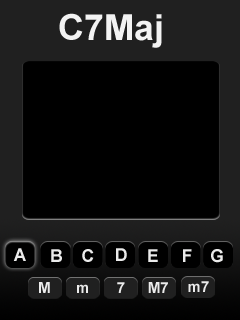
<style>
.page{position:relative;width:240px;height:320px;background:#000000}
.page>*{position:absolute;margin:0}
.t1{font:36px "Arial-BoldMT";color:#f3f3f3}
.t2{font:17.7px "Arial-BoldMT";color:#ebebeb}
.t3{font:15.1px "Arial-BoldMT";color:#ebebeb}
</style>
<div class="page">
<p class="t1" style="left:59px;top:13px;width:103px;height:35px">C7Maj</p>
<p class="t2" style="left:13px;top:248px;width:13px;height:13px">A</p>
<p class="t2" style="left:51px;top:249px;width:11px;height:13px">B</p>
<p class="t2" style="left:82px;top:249px;width:12px;height:13px">C</p>
<p class="t2" style="left:116px;top:248px;width:11px;height:13px">D</p>
<p class="t2" style="left:148px;top:249px;width:10px;height:13px">E</p>
<p class="t2" style="left:183px;top:249px;width:9px;height:13px">F</p>
<p class="t2" style="left:211px;top:249px;width:12px;height:14px">G</p>
<p class="t3" style="left:188px;top:281px;width:21px;height:11px">m7</p>
<p class="t3" style="left:39px;top:282px;width:11px;height:11px">M</p>
<p class="t3" style="left:77px;top:284px;width:11px;height:9px">m</p>
<p class="t3" style="left:117px;top:282px;width:8px;height:11px">7</p>
<p class="t3" style="left:148px;top:282px;width:20px;height:11px">M7</p>
</div>
